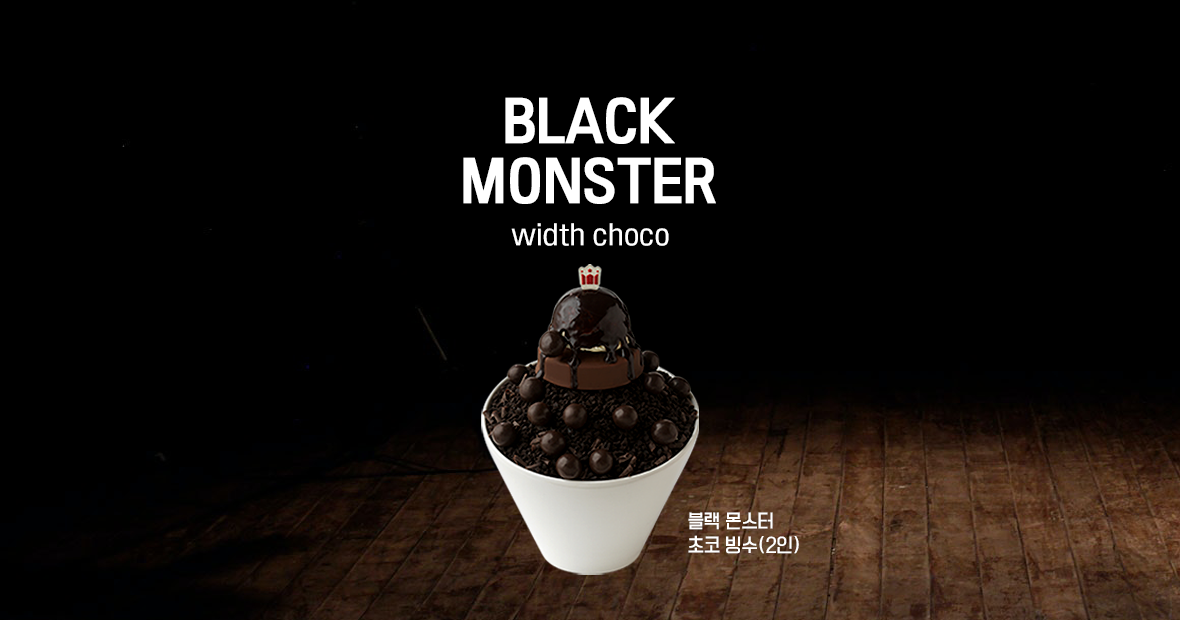
<style>
.page{position:relative;width:1180px;height:620px;background:#000000}
.page>*{position:absolute;margin:0}
.t1{font:48px/60px "TTManbalchungchunB";letter-spacing:0.005em;color:#ffffff}
.t2{font:24px "TTManbalchungchunL";letter-spacing:0.005em;color:#ffffff}
.t3{font:18px/24px "TTManbalchungchunL";letter-spacing:0.005em;color:#ffffff}
</style>
<div class="page">
<p class="t1" style="left:463px;top:97px;width:253px;height:107px;text-align:center">BLACK<br>MONSTER</p>
<p class="t2" style="left:511px;top:223px;width:158px;height:23px">width choco</p>
<p class="t3" style="left:688px;top:512px;width:111px;height:42px">블랙 몬스터<br>초코 빙수(2인)</p>
</div>
